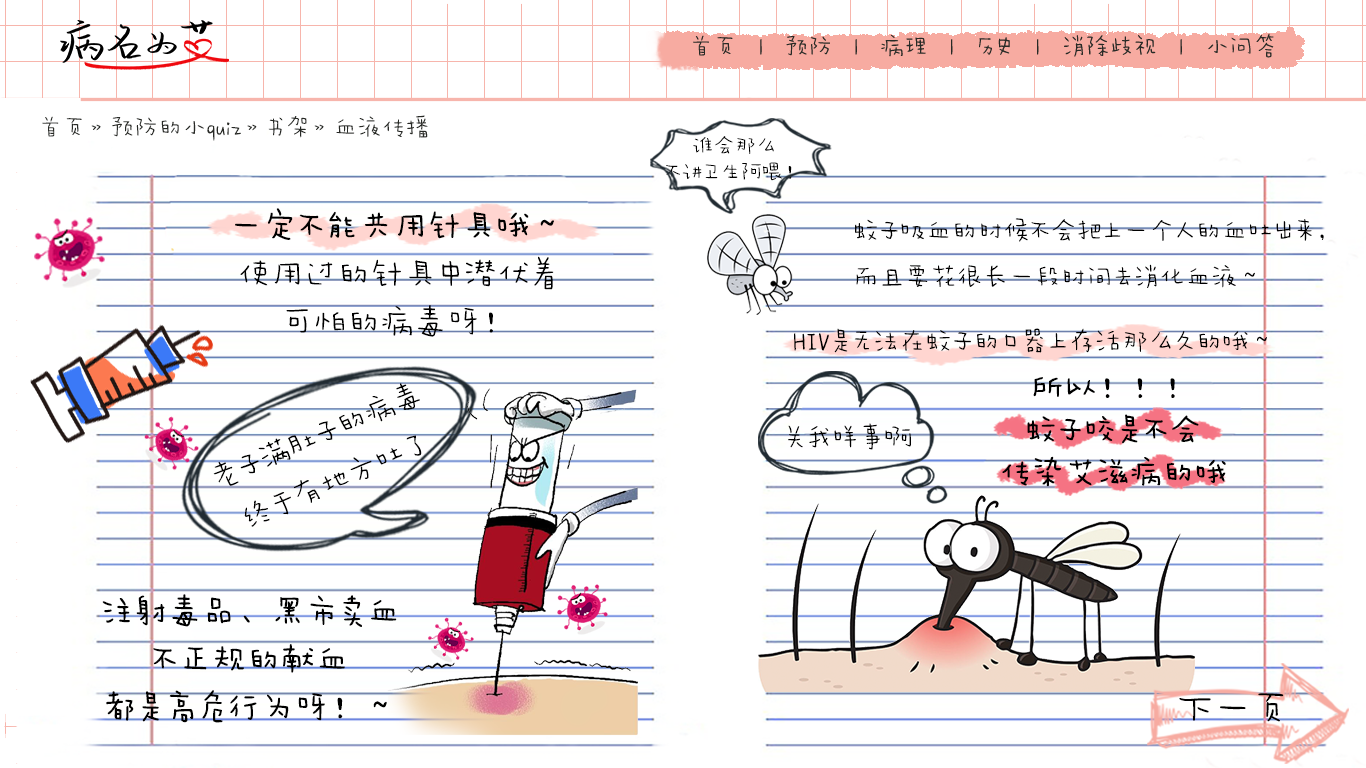
<style>
.page{position:relative;width:1366px;height:768px;background:#ffffff}
.page>*{position:absolute;margin:0}
.t1{font:24px "AaWanWan";color:#282a26}
.t2{font:21.2px/26.5px "AaWanWan";color:#000000}
.t3{font:33.3px/48px "AaWanWan";color:#000000}
.t4{font:33.3px/48px "AaWanWan";color:#000000;font-weight:bold}
.t5{font:25.9px/46.1px "AaWanWan";color:#000000}
.t6{font:26.5px "AaWanWan";color:#000000}
.t7{font:31.8px/42.4px "AaWanWan";color:#000000;font-weight:bold}
.t8{font:30px/48px "AaWanWan";color:#000000}
.t9{font:39.9px "AaWanWan";letter-spacing:-0.05em;color:#000000}
</style>
<div class="page">
<p class="t1" style="left:42px;top:115px;width:386px;height:26px">首页》预防的小quiz》书架》血液传播</p>
<p class="t2" style="left:666px;top:136px;width:126px;height:45px;text-align:center">谁会那么<br>不讲卫生阿喂！</p>
<p class="t3" style="left:235px;top:208px;width:319px;height:129px;text-align:center"><span class="t4">一定不能共用针具哦～<br></span>使用过的针具中潜伏着<br>可怕的病毒呀！</p>
<p class="t5" style="left:855px;top:218px;width:469px;height:70px">蚊子吸血的时候不会把上一个人的血吐出来，<br>而且要花很长一段时间去消化血液～</p>
<p class="t6" style="left:794px;top:328px;width:473px;height:25px">HIV是无法在蚊子的口器上存活那么久的哦～</p>
<p class="t7" style="left:1002px;top:377px;width:224px;height:110px;text-align:center">所以！！！<br>蚊子咬是不会<br>传染艾滋病的哦</p>
<p class="t8" style="left:213px;top:383px;width:209px;height:144px;text-align:center;rotate:-23deg">老子满肚子的病毒<br>终于有地方吐了</p>
<p class="t6" style="left:788px;top:423px;width:123px;height:27px">关我咩事啊</p>
<p class="t4" style="left:102px;top:594px;width:295px;height:129px;text-align:center">注射毒品、黑市卖血<br>不正规的献血<br>都是高危行为呀！～</p>
<p class="t9" style="left:1179px;top:693px;width:105px;height:29px">下一页</p>
</div>
